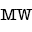
<style>
.page{position:relative;width:32px;height:32px;background:#ffffff}
.page>*{position:absolute;margin:0}
.t1{font:16.9px "AmericanTypewriter";color:#000000}
</style>
<div class="page">
<p class="t1" style="left:0px;top:9px;width:33px;height:11px">MW</p>
</div>
